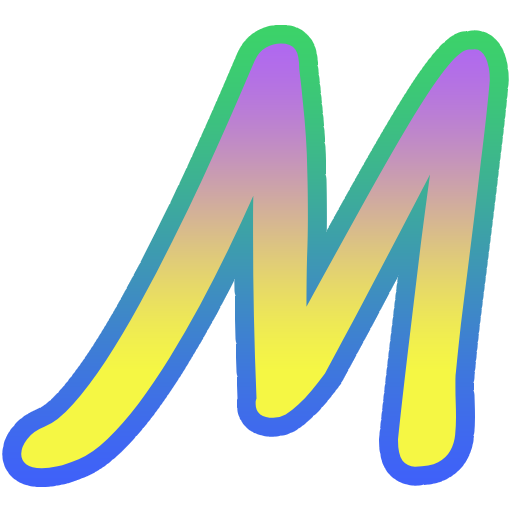
<style>
.page{position:relative;width:512px;height:512px;background:#ffffff}
.page>*{position:absolute;margin:0}
.t1{font:591.2px "Damion"}
</style>
<div class="page">
<p class="t1" style="left:21px;top:43px;width:469px;height:426px">M</p>
</div>
